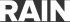
<style>
.page{position:relative;width:70px;height:22px;background:#ffffff}
.page>*{position:absolute;margin:0}
.t1{font:31.6px "ProximaNova-Extrabld";letter-spacing:-0.02em;color:#ffffff}
</style>
<div class="page">
<p class="t1" style="left:0px;top:0px;width:70px;height:22px">RAIN</p>
</div>
